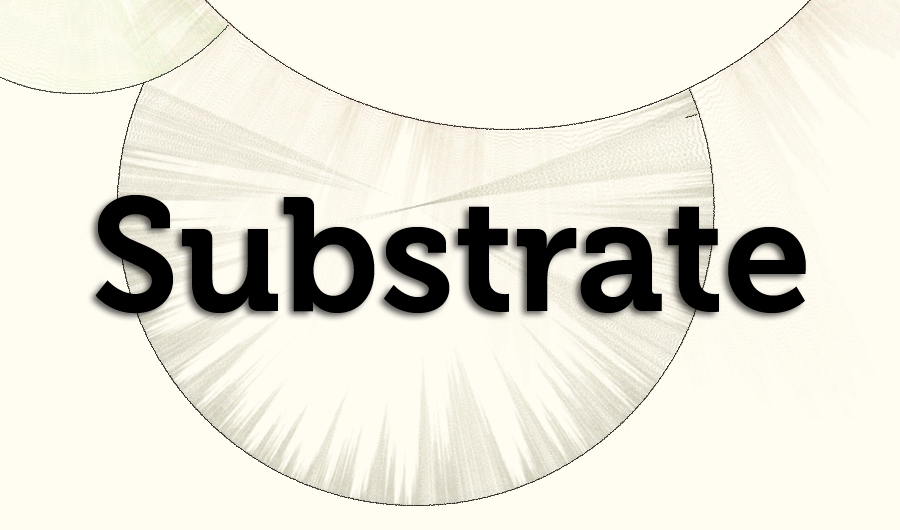
<style>
.page{position:relative;width:900px;height:530px;background:#fffcf2}
.page>*{position:absolute;margin:0}
.t1{font:160px "Museo-700";color:#000000}
</style>
<div class="page">
<p class="t1" style="left:95px;top:195px;width:711px;height:119px">Substrate</p>
</div>
